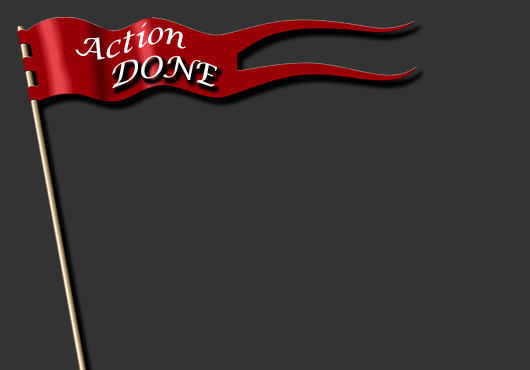
<style>
.page{position:relative;width:530px;height:370px;background:#333333}
.page>*{position:absolute;margin:0}
.t1{font:30px "LucidaCalligraphy-Italic";color:#ffffff}
</style>
<div class="page">
<p class="t1" style="left:75px;top:21px;width:111px;height:39px">Action</p>
<p class="t1" style="left:112px;top:55px;width:106px;height:34px">DONE</p>
</div>
